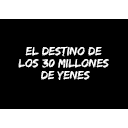
<style>
.page{position:relative;width:128px;height:128px;background:#000000}
.page>*{position:absolute;margin:0}
.t1{font:12.3px/11.8px "EdoSZ";color:#ffffff}
</style>
<div class="page">
<p class="t1" style="left:18px;top:46px;width:91px;height:34px;text-align:center">El destino de <br>los 30 millones <br>de yenes</p>
</div>
